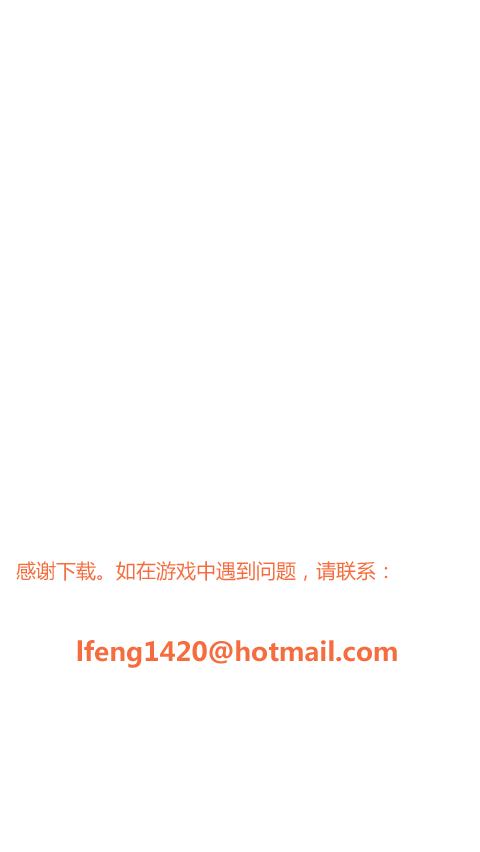
<style>
.page{position:relative;width:480px;height:852px;background:#ffffff}
.page>*{position:absolute;margin:0}
.t1{font:20px "MicrosoftYaHei";color:#f56d3e}
.t2{font:26px "MicrosoftYaHei-Bold";color:#f56d3e}
</style>
<div class="page">
<p class="t1" style="left:16px;top:561px;width:372px;height:20px">感谢下载。如在游戏中遇到问题，请联系：</p>
<p class="t2" style="left:77px;top:640px;width:320px;height:28px">lfeng1420@hotmail.com</p>
</div>
